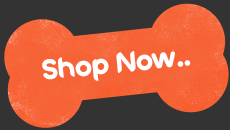
<style>
.page{position:relative;width:230px;height:130px;background:#333333}
.page>*{position:absolute;margin:0}
.t1{font:50px "Enigma";color:#ffffff}
</style>
<div class="page">
<p class="t1" style="left:42px;top:51px;width:149px;height:30px;rotate:-6deg">Shop Now..</p>
</div>
